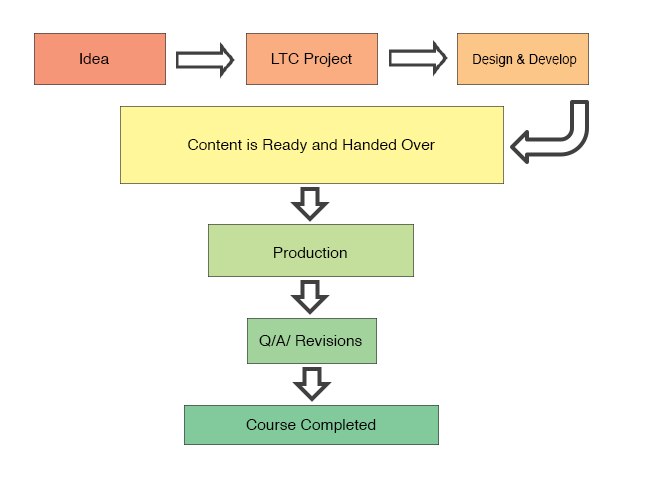
<style>
.page{position:relative;width:667px;height:500px;background:#ffffff}
.page>*{position:absolute;margin:0}
.t1{font:15.6px "Helvetica";color:#000000}
.t2{font:13px "Helvetica";color:#000000}
</style>
<div class="page">
<p class="t1" style="left:80px;top:53px;width:29px;height:11px">Idea</p>
<p class="t1" style="left:271px;top:53px;width:81px;height:14px">LTC Project</p>
<p class="t2" style="left:473px;top:54px;width:104px;height:13px">Design &amp; Develop</p>
<p class="t1" style="left:188px;top:139px;width:247px;height:14px">Content is Ready and Handed Over</p>
<p class="t1" style="left:274px;top:247px;width:73px;height:11px">Production</p>
<p class="t1" style="left:259px;top:335px;width:103px;height:12px">Q/A/ Revisions</p>
<p class="t1" style="left:246px;top:419px;width:130px;height:14px">Course Completed</p>
</div>
